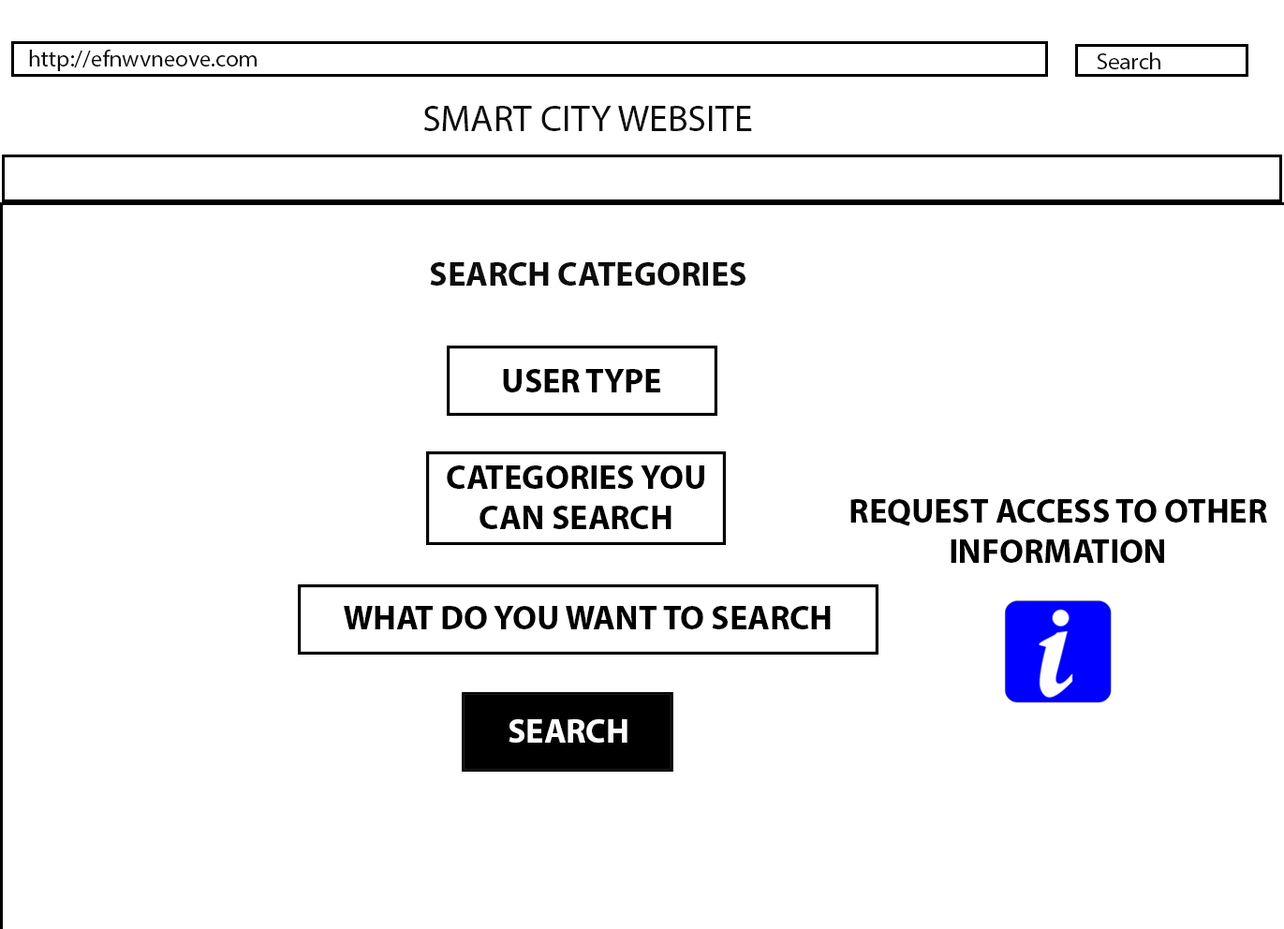
<style>
.page{position:relative;width:1284px;height:929px;background:#ffffff}
.page>*{position:absolute;margin:0}
.t1{font:23.4px "MyriadPro-Regular";color:#0e0d0c}
.t2{font:37.5px "MyriadPro-Regular";color:#0e0d0c}
.t3{font:33.7px "MyriadPro-Bold";color:#0e0d0c}
.t4{font:33.7px "MyriadPro-Bold";color:#000000}
.t5{font:33.7px "MyriadPro-Bold";color:#fdfdfd}
</style>
<div class="page">
<p class="t1" style="left:29px;top:50px;width:228px;height:21px">http://efnwvneove.com</p>
<p class="t1" style="left:1096px;top:52px;width:64px;height:17px">Search</p>
<p class="t2" style="left:424px;top:106px;width:328px;height:25px">SMART CITY WEBSITE</p>
<p class="t3" style="left:430px;top:262px;width:315px;height:24px">SEARCH CATEGORIES</p>
<p class="t4" style="left:503px;top:369px;width:157px;height:23px">USER TYPE</p>
<p class="t4" style="left:447px;top:465px;width:257px;height:64px;text-align:center">CATEGORIES YOU CAN SEARCH</p>
<p class="t4" style="left:850px;top:499px;width:417px;height:64px;text-align:center">REQUEST ACCESS TO OTHER INFORMATION</p>
<p class="t4" style="left:344px;top:606px;width:487px;height:23px">WHAT DO YOU WANT TO SEARCH</p>
<p class="t5" style="left:508px;top:719px;width:119px;height:24px">SEARCH</p>
</div>
